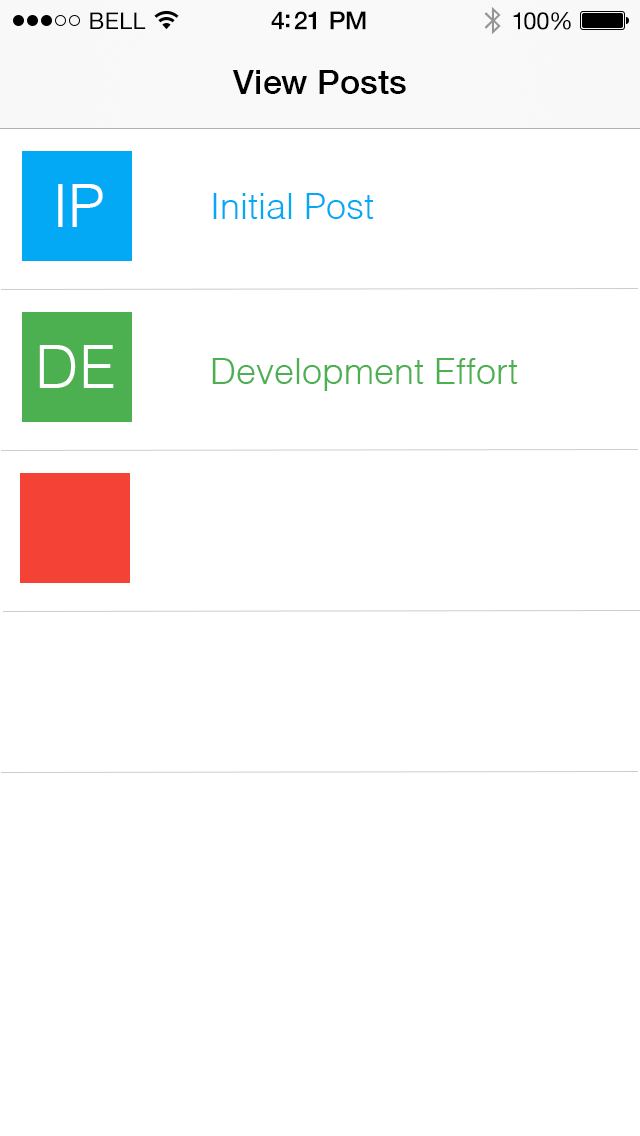
<style>
.page{position:relative;width:640px;height:1136px;background:#ffffff}
.page>*{position:absolute;margin:0}
.t1{font:23px "HelveticaNeue";letter-spacing:0.02em;color:#000000}
.t2{font:25px "HelveticaNeue-Medium";letter-spacing:-0.02em;color:#000000}
.t3{font:24px "HelveticaNeue";letter-spacing:-0.02em;color:#010101}
.t4{font:34px "HelveticaNeue-Medium";color:#000000}
.t5{font:60px "Helvetica-Light";color:#ffffff}
.t6{font:36px "Helvetica-Light";color:#03a9f4}
.t7{font:36px "Helvetica-Light";color:#4caf50}
</style>
<div class="page">
<p class="t1" style="left:90px;top:12px;width:56px;height:17px">BELL</p>
<p class="t2" style="left:271px;top:11px;width:95px;height:19px">4:21 PM</p>
<p class="t3" style="left:513px;top:12px;width:58px;height:18px">100%</p>
<p class="t4" style="left:232px;top:70px;width:174px;height:24px">View Posts</p>
<p class="t5" style="left:58px;top:184px;width:45px;height:43px">IP</p>
<p class="t6" style="left:213px;top:193px;width:161px;height:26px">Initial Post</p>
<p class="t5" style="left:39px;top:345px;width:75px;height:43px">DE</p>
<p class="t7" style="left:212px;top:358px;width:306px;height:33px">Development Effort</p>
</div>
